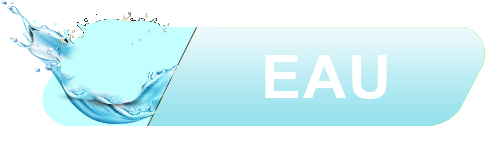
<style>
.page{position:relative;width:485px;height:141px;background:#ffffff}
.page>*{position:absolute;margin:0}
.t1{font:60px "Arial-BoldMT";letter-spacing:-0.005em;color:#ffffff;text-transform:uppercase}
</style>
<div class="page">
<p class="t1" style="left:265px;top:55px;width:122px;height:44px">Eau</p>
</div>
